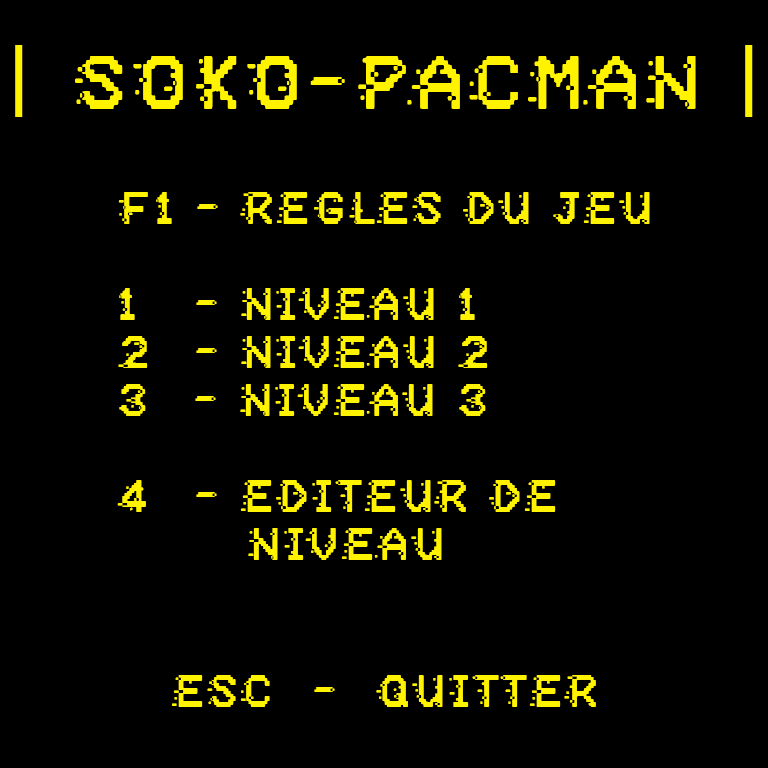
<style>
.page{position:relative;width:768px;height:768px;background:#000000}
.page>*{position:absolute;margin:0}
.t1{font:76.2px "PositiveSystem";letter-spacing:0.2em;color:#fff300;scale:0.89 1}
.t2{font:76.2px "Geometos";letter-spacing:0.2em;color:#fff300;scale:0.89 1}
.t3{font:44.8px "PositiveSystem";letter-spacing:0.2em;color:#fff300;scale:0.89 1}
</style>
<div class="page">
<p class="t1" style="left:15px;top:45px;width:738px;height:72px"><span class="t2">| </span>SOKO-PACMAN <span class="t2">|</span></p>
<p class="t3" style="left:117px;top:192px;width:533px;height:368px">F1 - Règles du jeu<br><br>1   - Niveau 1<br>2   - Niveau 2<br>3   - Niveau 3<br><br>4    - Editeur de <br>     niveau</p>
<p class="t3" style="left:172px;top:675px;width:424px;height:32px">Esc  -  Quitter</p>
</div>
